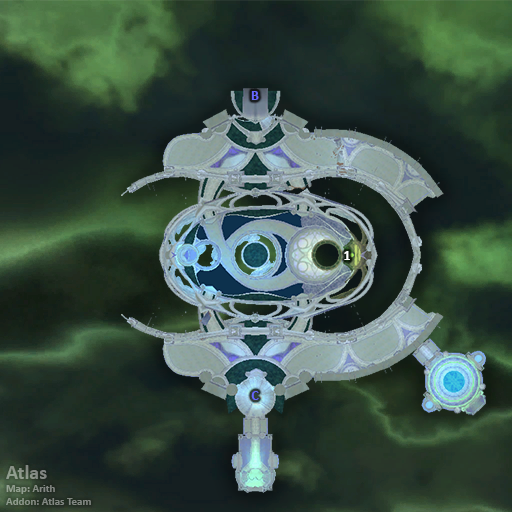
<style>
.page{position:relative;width:512px;height:512px}
.page>*{position:absolute;margin:0}
.t1{font:14px "Calibri-Bold";color:#6666ff}
.t2{font:14px "Calibri-Bold";color:#ffffff}
.t3{font:11px "Calibri-Bold";color:#868f85}
.t4{font:20px "Calibri-Bold";color:#868f85}
</style>
<div class="page">
<p class="t1" style="left:251px;top:91px;width:8px;height:9px">B</p>
<p class="t2" style="left:344px;top:251px;width:6px;height:9px">1</p>
<p class="t1" style="left:251px;top:391px;width:8px;height:9px">C</p>
<p class="t3" style="left:6px;top:465px;width:85px;height:40px"><span class="t4">Atlas<br></span>Map: Arith<br>Addon: Atlas Team</p>
</div>
